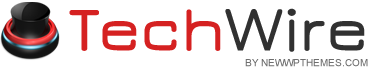
<style>
.page{position:relative;width:369px;height:68px;background:#ffffff}
.page>*{position:absolute;margin:0}
.t1{font:64px "Jura-DemiBold";color:#d52121;font-weight:bold}
.t2{font:64px "Jura-DemiBold";color:#313131;font-weight:bold}
.t3{font:10px "ArialMT";color:#6e6e6e;text-transform:uppercase}
</style>
<div class="page">
<p class="t1" style="left:69px;top:8px;width:296px;height:44px">Tech<span class="t2">Wire</span></p>
<p class="t3" style="left:245px;top:59px;width:123px;height:8px">by NewWpThemes.com</p>
</div>
